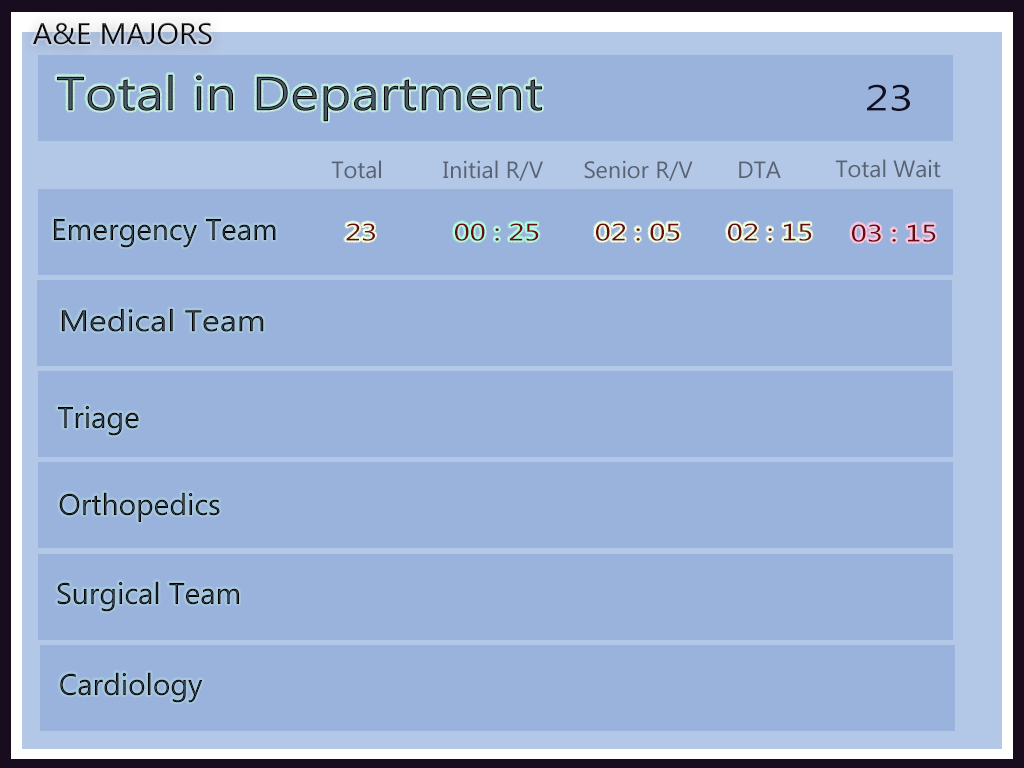
<style>
.page{position:relative;width:1024px;height:768px;background:#99b3dd}
.page>*{position:absolute;margin:0}
.t1{font:30px "MicrosoftNewTaiLue";color:#09080c}
.t2{font:48px "MicrosoftNewTaiLue";scale:1.15 1}
.t3{font:36px "MicrosoftNewTaiLue";color:#120d1f;scale:1.24 1}
.t4{font:23.5px "MicrosoftNewTaiLue";color:#586373}
.t5{font:30px "MicrosoftNewTaiLue"}
.t6{font:24px "MicrosoftNewTaiLue";color:#670a12;scale:1.24 1}
.t7{font:30px "MicrosoftNewTaiLue";scale:1.12 1}
</style>
<div class="page">
<p class="t1" style="left:33px;top:22px;width:179px;height:23px">A&amp;E MAJORS</p>
<p class="t2" style="left:57px;top:74px;width:485px;height:48px">Total in Department</p>
<p class="t3" style="left:867px;top:84px;width:43px;height:27px">23</p>
<p class="t4" style="left:331px;top:160px;width:50px;height:19px">Total</p>
<p class="t4" style="left:443px;top:160px;width:100px;height:21px">Initial R/V</p>
<p class="t4" style="left:584px;top:160px;width:109px;height:21px">Senior R/V</p>
<p class="t4" style="left:739px;top:161px;width:42px;height:17px">DTA</p>
<p class="t4" style="left:835px;top:159px;width:106px;height:19px">Total Wait</p>
<p class="t5" style="left:54px;top:219px;width:222px;height:29px">Emergency Team</p>
<p class="t6" style="left:346px;top:223px;width:29px;height:18px">23</p>
<p class="t6" style="left:455px;top:223px;width:84px;height:18px">00 : 25</p>
<p class="t6" style="left:596px;top:223px;width:84px;height:18px">02 : 05</p>
<p class="t6" style="left:728px;top:223px;width:84px;height:18px">02 : 15</p>
<p class="t6" style="left:852px;top:224px;width:84px;height:18px">03 : 15</p>
<p class="t7" style="left:62px;top:309px;width:202px;height:23px">Medical Team</p>
<p class="t5" style="left:58px;top:406px;width:81px;height:30px">Triage</p>
<p class="t5" style="left:59px;top:492px;width:161px;height:30px">Orthopedics</p>
<p class="t5" style="left:57px;top:581px;width:182px;height:31px">Surgical Team</p>
<p class="t5" style="left:60px;top:672px;width:143px;height:31px">Cardiology</p>
</div>
